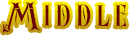
<style>
.page{position:relative;width:130px;height:45px;background:#ffffff}
.page>*{position:absolute;margin:0}
.t1{font:30px "Ornatique";letter-spacing:0.2em;color:#6a0304}
</style>
<div class="page">
<p class="t1" style="left:2px;top:2px;width:124px;height:31px">Middle</p>
</div>
